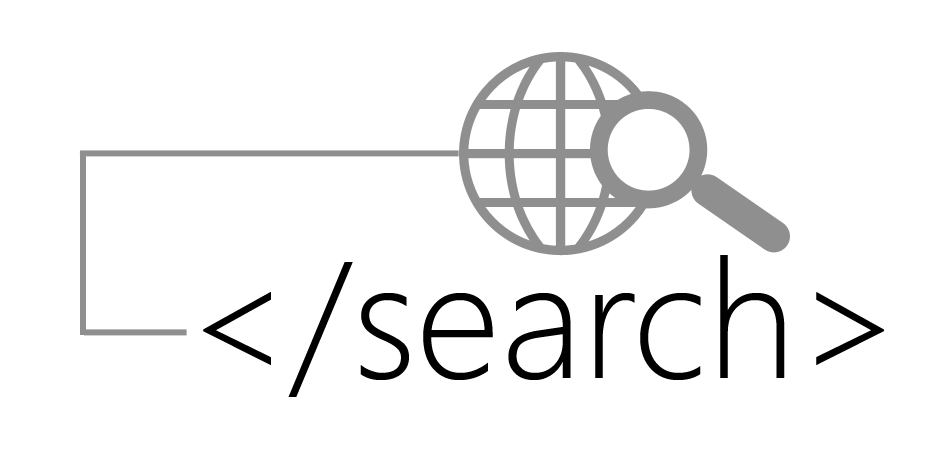
<style>
.page{position:relative;width:945px;height:453px;background:#ffffff}
.page>*{position:absolute;margin:0}
.t1{font:165.9px "SegoeUI-Light";color:#000000}
</style>
<div class="page">
<p class="t1" style="left:203px;top:255px;width:681px;height:142px">&lt;/search&gt;</p>
</div>
